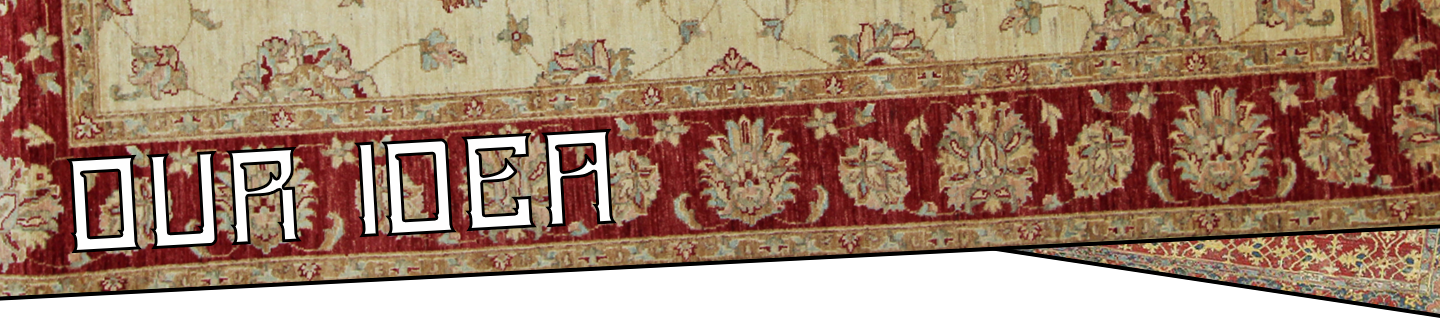
<style>
.page{position:relative;width:1440px;height:318px}
.page>*{position:absolute;margin:0}
.t1{font:200px "A25KAMADJAJA-Regular"}
</style>
<div class="page">
<p class="t1" style="left:66px;top:128px;width:551px;height:126px;rotate:-3deg">Our Idea</p>
</div>
